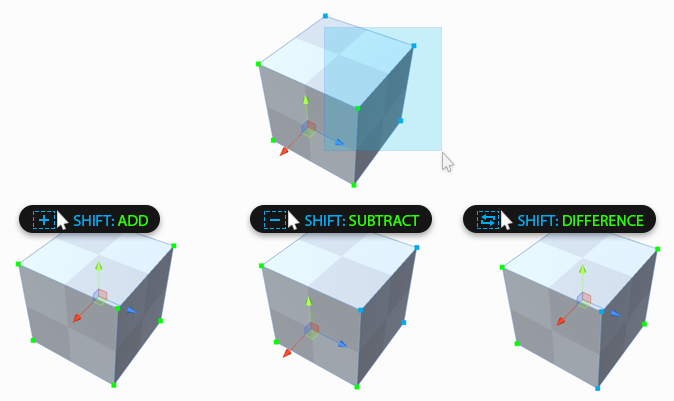
<style>
.page{position:relative;width:674px;height:401px;background:#fcfcfc}
.page>*{position:absolute;margin:0}
.t1{font:12px "MyriadPro-Regular";color:#00aaef;text-transform:uppercase}
.t2{font:12px "MyriadPro-Regular";color:#2aff00;text-transform:uppercase}
</style>
<div class="page">
<p class="t1" style="left:73px;top:215px;width:75px;height:11px">Shift: <span class="t2">ADD</span></p>
<p class="t2" style="left:305px;top:215px;width:115px;height:11px"><span class="t1">Shift: </span>subtract</p>
<p class="t2" style="left:518px;top:215px;width:126px;height:11px"><span class="t1">Shift: </span>difference</p>
</div>
